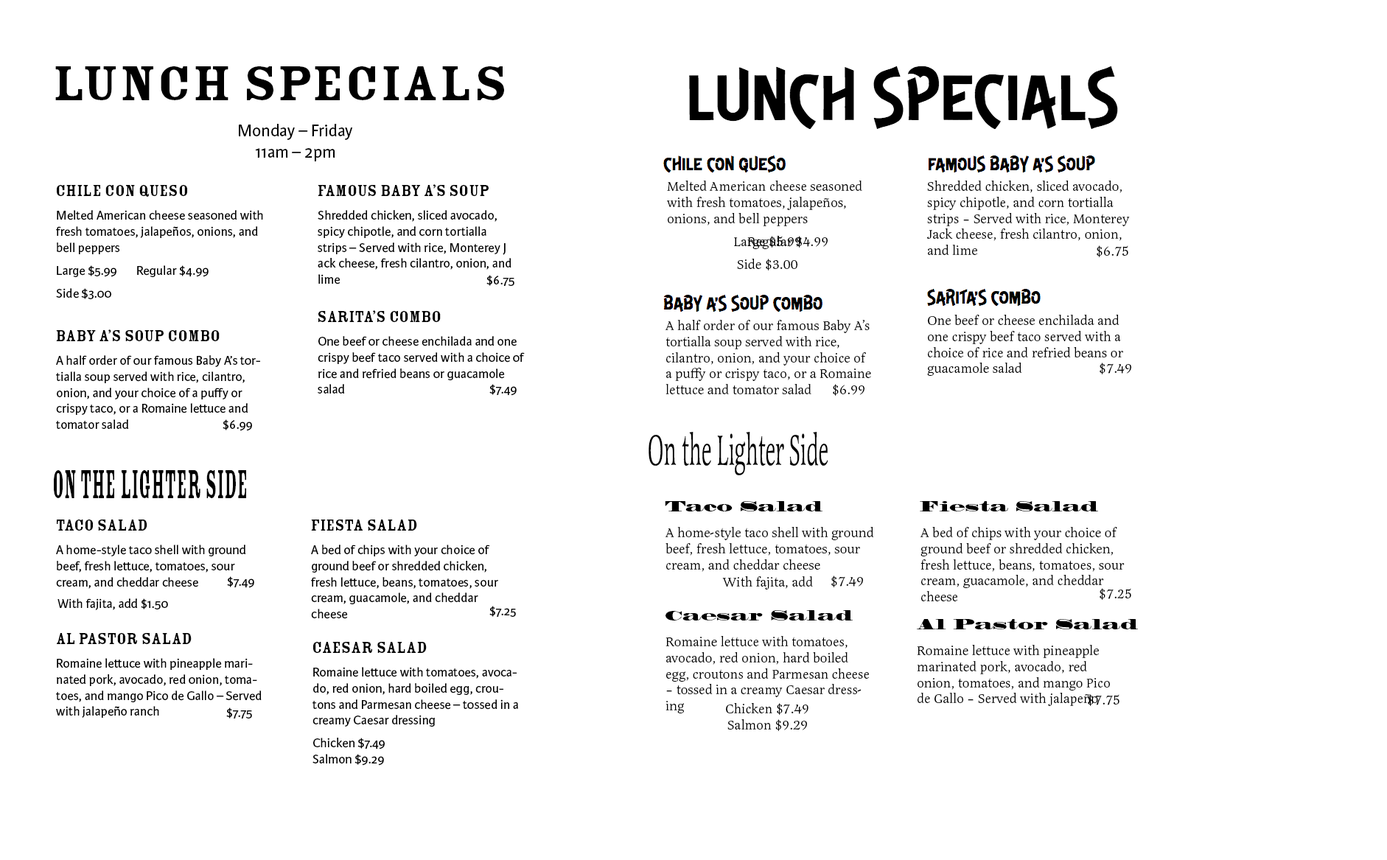
<style>
.page{position:relative;width:1387px;height:860px;background:#ffffff}
.page>*{position:absolute;margin:0}
.t1{font:53.1px "RosewoodStd-Fill";color:#000000;scale:1.19 1}
.t2{font:17.7px "KarminaSans";color:#000000}
.t3{font:17.7px "RosewoodStd-Fill";color:#000000}
.t4{font:13.3px "LatiennePro-Regular";color:#000000}
.t5{font:13.3px "KarminaSans";color:#000000}
.t6{font:44.2px "LatiennePro-Regular";color:#000000;scale:0.48 1}
.t7{font:44.2px "RosewoodStd-Fill";color:#000000;scale:0.48 1}
.t8{font:13.3px "MadroneStd";color:#000000}
</style>
<div class="page">
<p class="t1" style="left:55px;top:66px;width:449px;height:34px">Lunch Specials</p>
<p class="t2" style="left:239px;top:124px;width:114px;height:37px;text-align:center">Monday – Friday<br>11am – 2pm</p>
<p class="t3" style="left:57px;top:184px;width:130px;height:13px">Chile con Queso</p>
<p class="t3" style="left:318px;top:184px;width:171px;height:12px">Famous Baby A’s Soup</p>
<p class="t4" style="left:667px;top:181px;width:195px;height:45px">Melted American cheese seasoned with fresh tomatoes, jalapeños, onions, and bell peppers</p>
<p class="t4" style="left:927px;top:181px;width:203px;height:74px">Shredded chicken, sliced avocado, spicy chipotle, and corn tortialla <br>strips – Served with rice, Monterey <br>Jack cheese, fresh cilantro, onion, and lime</p>
<p class="t5" style="left:56px;top:210px;width:207px;height:44px">Melted American cheese seasoned with fresh tomatoes, jalapeños, onions, and bell peppers</p>
<p class="t5" style="left:318px;top:210px;width:193px;height:74px">Shredded chicken, sliced avocado, spicy chipotle, and corn tortialla <br>strips – Served with rice, Monterey J<br>ack cheese, fresh cilantro, onion, and lime</p>
<p class="t4" style="left:734px;top:236px;width:67px;height:13px">Large $5.99</p>
<p class="t4" style="left:747px;top:236px;width:80px;height:13px">Regular $4.99</p>
<p class="t4" style="left:1096px;top:245px;width:32px;height:12px">$6.75</p>
<p class="t5" style="left:57px;top:265px;width:59px;height:12px">Large $5.99</p>
<p class="t5" style="left:137px;top:265px;width:72px;height:12px">Regular $4.99</p>
<p class="t4" style="left:737px;top:259px;width:60px;height:11px">Side $3.00</p>
<p class="t5" style="left:486px;top:275px;width:28px;height:12px">$6.75</p>
<p class="t5" style="left:56px;top:288px;width:55px;height:11px">Side $3.00</p>
<p class="t3" style="left:318px;top:310px;width:123px;height:12px">Sarita’s combo</p>
<p class="t4" style="left:927px;top:315px;width:196px;height:61px">One beef or cheese enchilada and one crispy beef taco served with a choice of rice and refried beans or guacamole salad</p>
<p class="t3" style="left:56px;top:329px;width:164px;height:12px">Baby A’s Soup Combo</p>
<p class="t4" style="left:665px;top:320px;width:206px;height:74px">A half order of our famous Baby A’s tortialla soup served with rice, cilantro, onion, and your choice of a puffy or crispy taco, or a Romaine lettuce and tomator salad</p>
<p class="t5" style="left:318px;top:336px;width:207px;height:57px">One beef or cheese enchilada and one crispy beef taco served with a choice of rice and refried beans or guacamole salad</p>
<p class="t5" style="left:56px;top:355px;width:204px;height:74px">A half order of our famous Baby A’s tortialla soup served with rice, cilantro, onion, and your choice of a puffy or crispy taco, or a Romaine lettuce and tomator salad</p>
<p class="t4" style="left:1099px;top:363px;width:32px;height:11px">$7.49</p>
<p class="t5" style="left:489px;top:384px;width:28px;height:12px">$7.49</p>
<p class="t4" style="left:833px;top:384px;width:31px;height:12px">$6.99</p>
<p class="t5" style="left:223px;top:419px;width:29px;height:12px">$6.99</p>
<p class="t6" style="left:648px;top:432px;width:180px;height:43px">On the Lighter Side</p>
<p class="t7" style="left:54px;top:470px;width:192px;height:28px">On the Lighter Side</p>
<p class="t8" style="left:665px;top:501px;width:157px;height:10px">Taco Salad</p>
<p class="t8" style="left:920px;top:501px;width:178px;height:10px">Fiesta Salad</p>
<p class="t3" style="left:57px;top:519px;width:90px;height:12px">Taco Salad</p>
<p class="t3" style="left:311px;top:519px;width:106px;height:12px">Fiesta Salad</p>
<p class="t4" style="left:665px;top:527px;width:209px;height:45px">A home-style taco shell with ground beef, fresh lettuce, tomatoes, sour cream, and cheddar cheese</p>
<p class="t4" style="left:920px;top:527px;width:204px;height:74px">A bed of chips with your choice of ground beef or shredded chicken, <br>fresh lettuce, beans, tomatoes, sour cream, guacamole, and cheddar <br>cheese</p>
<p class="t5" style="left:56px;top:545px;width:189px;height:44px">A home-style taco shell with ground beef, fresh lettuce, tomatoes, sour cream, and cheddar cheese</p>
<p class="t5" style="left:311px;top:545px;width:187px;height:74px">A bed of chips with your choice of ground beef or shredded chicken, <br>fresh lettuce, beans, tomatoes, sour cream, guacamole, and cheddar <br>cheese</p>
<p class="t5" style="left:227px;top:576px;width:27px;height:12px">$7.49</p>
<p class="t4" style="left:722px;top:576px;width:91px;height:13px">With fajita, add $1.50</p>
<p class="t4" style="left:831px;top:575px;width:32px;height:12px">$7.49</p>
<p class="t4" style="left:1099px;top:588px;width:32px;height:12px">$7.25</p>
<p class="t5" style="left:57px;top:598px;width:111px;height:12px">With fajita, add $1.50</p>
<p class="t5" style="left:489px;top:606px;width:27px;height:11px">$7.25</p>
<p class="t8" style="left:665px;top:610px;width:188px;height:10px">Caesar Salad</p>
<p class="t8" style="left:917px;top:619px;width:221px;height:10px">Al Pastor Salad</p>
<p class="t3" style="left:57px;top:632px;width:135px;height:12px">Al Pastor Salad</p>
<p class="t3" style="left:313px;top:641px;width:114px;height:12px">Caesar Salad</p>
<p class="t4" style="left:665px;top:636px;width:204px;height:77px">Romaine lettuce with tomatoes, avocado, red onion, hard boiled egg, croutons and Parmesan cheese – tossed in a creamy Caesar dressing</p>
<p class="t4" style="left:917px;top:645px;width:193px;height:61px">Romaine lettuce with pineapple marinated pork, avocado, red onion, tomatoes, and mango Pico de Gallo – Served with jalapeño ranch</p>
<p class="t5" style="left:56px;top:658px;width:206px;height:60px">Romaine lettuce with pineapple marinated pork, avocado, red onion, tomatoes, and mango Pico de Gallo – Served with jalapeño ranch</p>
<p class="t5" style="left:312px;top:667px;width:206px;height:60px">Romaine lettuce with tomatoes, avocado, red onion, hard boiled egg, croutons and Parmesan cheese – tossed in a creamy Caesar dressing</p>
<p class="t4" style="left:1088px;top:694px;width:31px;height:12px">$7.75</p>
<p class="t5" style="left:226px;top:707px;width:26px;height:12px">$7.75</p>
<p class="t4" style="left:726px;top:703px;width:82px;height:12px">Chicken $7.49</p>
<p class="t4" style="left:727px;top:719px;width:80px;height:12px">Salmon $9.29</p>
<p class="t5" style="left:313px;top:738px;width:72px;height:11px">Chicken $7.49</p>
<p class="t5" style="left:312px;top:754px;width:72px;height:12px">Salmon $9.29</p>
</div>
